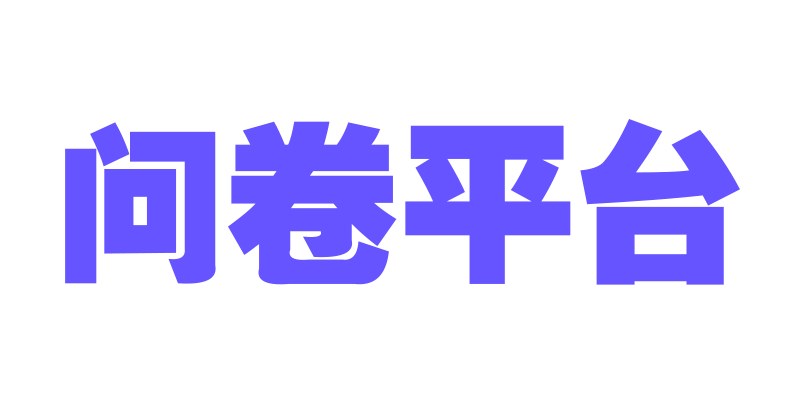
<style>
.page{position:relative;width:800px;height:400px;background:#ffffff}
.page>*{position:absolute;margin:0}
.t1{font:173.4px "FZCCHJW--GB1-0";color:#6554ff}
</style>
<div class="page">
<p class="t1" style="left:65px;top:119px;width:675px;height:166px">问卷平台</p>
</div>
